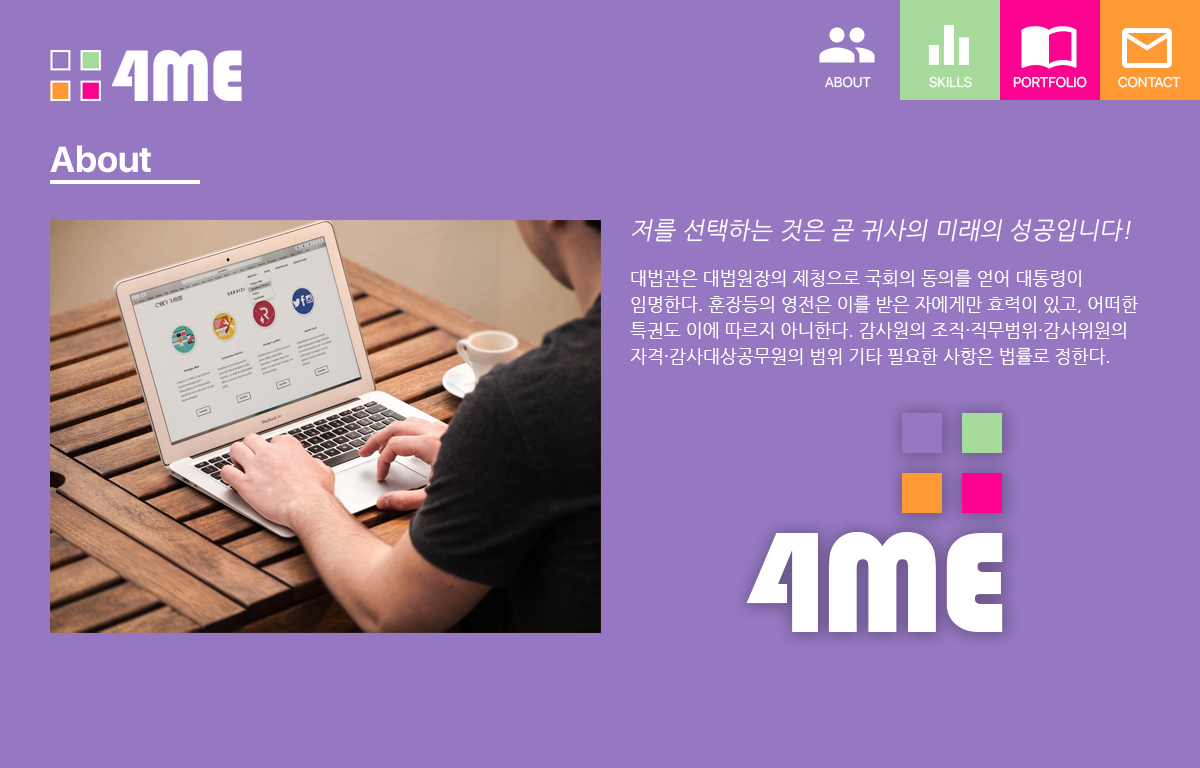
<style>
.page{position:relative;width:1200px;height:768px;background:#9678c2}
.page>*{position:absolute;margin:0}
.t1{font:14px "SFUIDisplay-Regular";color:#ffffff}
.t2{font:36px "SFUIDisplay-Bold";color:#ffffff}
.t3{font:18px/26px "NanumGothic";color:#ffffff}
.t4{font:24px/30px "NanumGothic";color:#ffffff;font-style:italic}
</style>
<div class="page">
<p class="t1" style="left:825px;top:76px;width:46px;height:12px">ABOUT</p>
<p class="t1" style="left:929px;top:76px;width:43px;height:12px">SKILLS</p>
<p class="t1" style="left:1013px;top:76px;width:74px;height:12px">PORTFOLIO</p>
<p class="t1" style="left:1118px;top:76px;width:63px;height:12px">CONTACT</p>
<p class="t2" style="left:50px;top:145px;width:101px;height:28px">About</p>
<p class="t3" style="left:630px;top:219px;width:508px;height:146px"><span class="t4">저를 선택하는 것은 곧 귀사의 미래의 성공입니다!<br><br></span>대법관은 대법원장의 제청으로 국회의 동의를 얻어 대통령이 임명한다. 훈장등의 영전은 이를 받은 자에게만 효력이 있고, 어떠한 특권도 이에 따르지 아니한다. 감사원의 조직·직무범위·감사위원의 자격·감사대상공무원의 범위 기타 필요한 사항은 법률로 정한다.</p>
</div>
